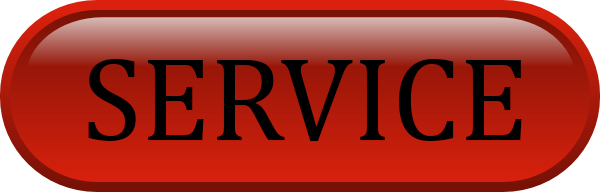
<style>
.page{position:relative;width:600px;height:192px}
.page>*{position:absolute;margin:0}
.t1{font:120.1px "Cambria";color:#000000}
</style>
<div class="page">
<p class="t1" style="left:88px;top:59px;width:434px;height:82px">SERVICE</p>
</div>
